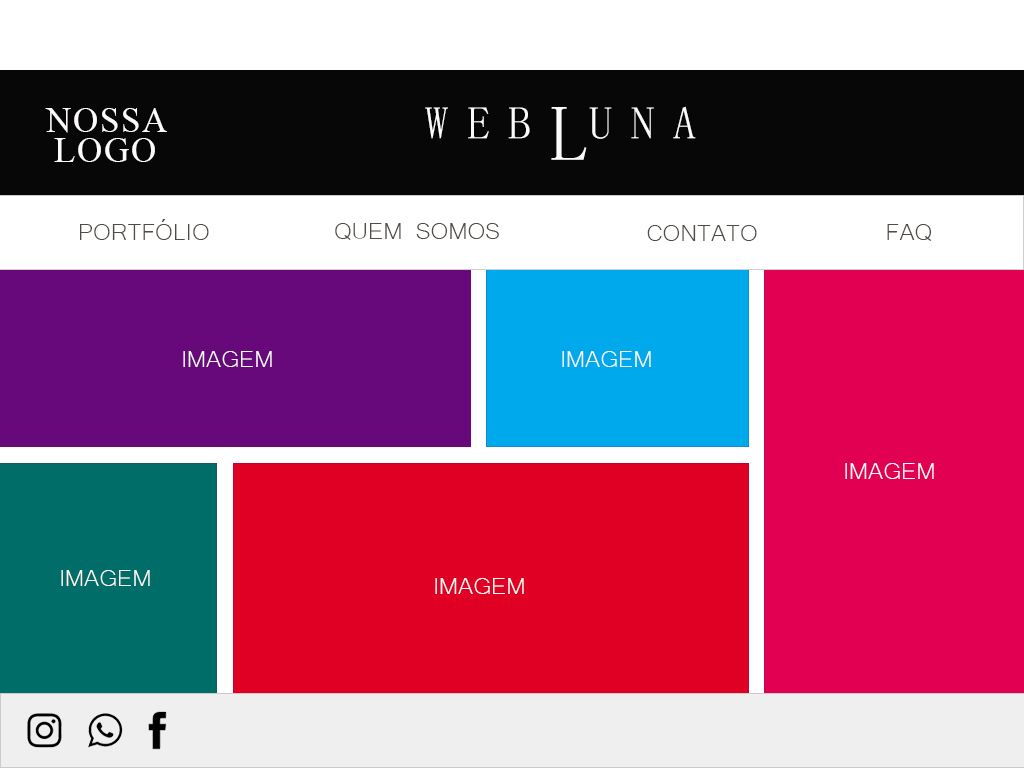
<style>
.page{position:relative;width:1024px;height:768px;background:#ffffff}
.page>*{position:absolute;margin:0}
.t1{font:60px/30px "TimesNewRomanPSMT";letter-spacing:0.05em;color:#fdfafc}
.t2{font:79px "NSimSun";letter-spacing:0.4em;color:#fdfafc}
.t3{font:79px "NSimSun";color:#fdfafc}
.t4{font:30px "Microsoft-Yi-Baiti";color:#504a45}
.t5{font:30px "Microsoft-Yi-Baiti";color:#fdfcfb}
</style>
<div class="page">
<p class="t1" style="left:45px;top:108px;width:122px;height:54px;text-align:center">NOSSA<br>LOGO</p>
<p class="t2" style="left:425px;top:106px;width:271px;height:33px">WEB UNA</p>
<p class="t3" style="left:551px;top:107px;width:36px;height:53px">L</p>
<p class="t4" style="left:80px;top:219px;width:129px;height:21px">PORTFÓLIO</p>
<p class="t4" style="left:335px;top:223px;width:164px;height:17px">QUEM SOMOS</p>
<p class="t4" style="left:647px;top:225px;width:110px;height:16px">CONTATO</p>
<p class="t4" style="left:887px;top:224px;width:45px;height:17px">FAQ</p>
<p class="t5" style="left:183px;top:351px;width:89px;height:16px">IMAGEM</p>
<p class="t5" style="left:562px;top:351px;width:89px;height:16px">IMAGEM</p>
<p class="t5" style="left:845px;top:463px;width:89px;height:16px">IMAGEM</p>
<p class="t5" style="left:61px;top:570px;width:89px;height:16px">IMAGEM</p>
<p class="t5" style="left:435px;top:578px;width:89px;height:16px">IMAGEM</p>
</div>
